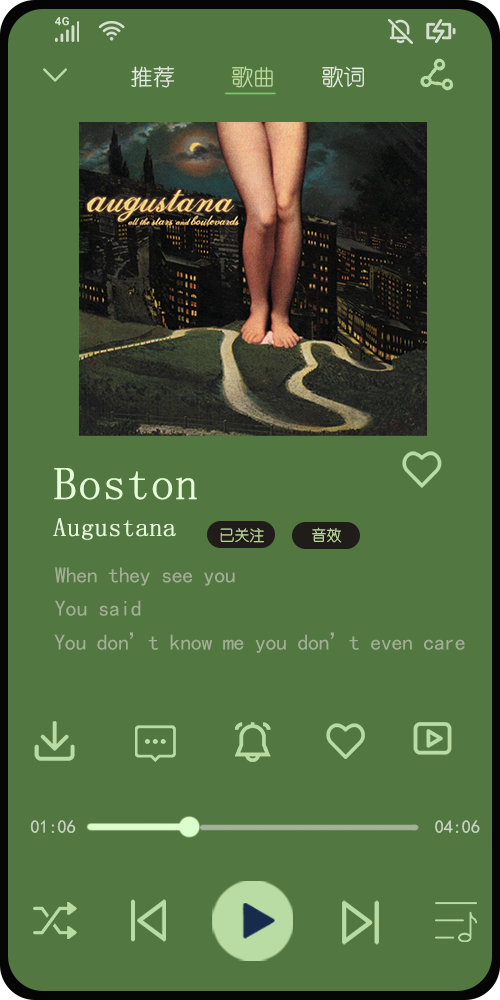
<style>
.page{position:relative;width:500px;height:1000px;background:#537740}
.page>*{position:absolute;margin:0}
.t1{font:22px "YouYuan";color:#e7f0e2}
.t2{font:22px "YouYuan";color:#c0de9e}
.t3{font:46px "YouYuan";color:#e5ffd8;font-weight:bold}
.t4{font:26px "YouYuan";color:#e4f9da;font-weight:bold}
.t5{font:15px "YouYuan";color:#c0de9e}
.t6{font:22px "SimHei";letter-spacing:-0.01em;color:#a2af95}
.t7{font:22px "SimHei";letter-spacing:-0.005em;color:#a2af95}
.t8{font:18px "SimHei";color:#c9d4c3}
</style>
<div class="page">
<p class="t1" style="left:131px;top:66px;width:44px;height:22px">推荐</p>
<p class="t2" style="left:231px;top:66px;width:42px;height:22px">歌曲</p>
<p class="t1" style="left:322px;top:66px;width:42px;height:22px">歌词</p>
<p class="t3" style="left:54px;top:468px;width:143px;height:32px">Boston</p>
<p class="t4" style="left:53px;top:518px;width:123px;height:22px">Augustana</p>
<p class="t5" style="left:220px;top:528px;width:44px;height:15px">已关注</p>
<p class="t5" style="left:312px;top:527px;width:30px;height:16px">音效</p>
<p class="t6" style="left:55px;top:567px;width:180px;height:19px">When they see you</p>
<p class="t7" style="left:55px;top:600px;width:86px;height:16px">You said</p>
<p class="t6" style="left:54px;top:632px;width:411px;height:21px">You don’t know me you don’t even care</p>
<p class="t8" style="left:30px;top:820px;width:46px;height:13px">01:06</p>
<p class="t8" style="left:435px;top:820px;width:45px;height:13px">04:06</p>
</div>
